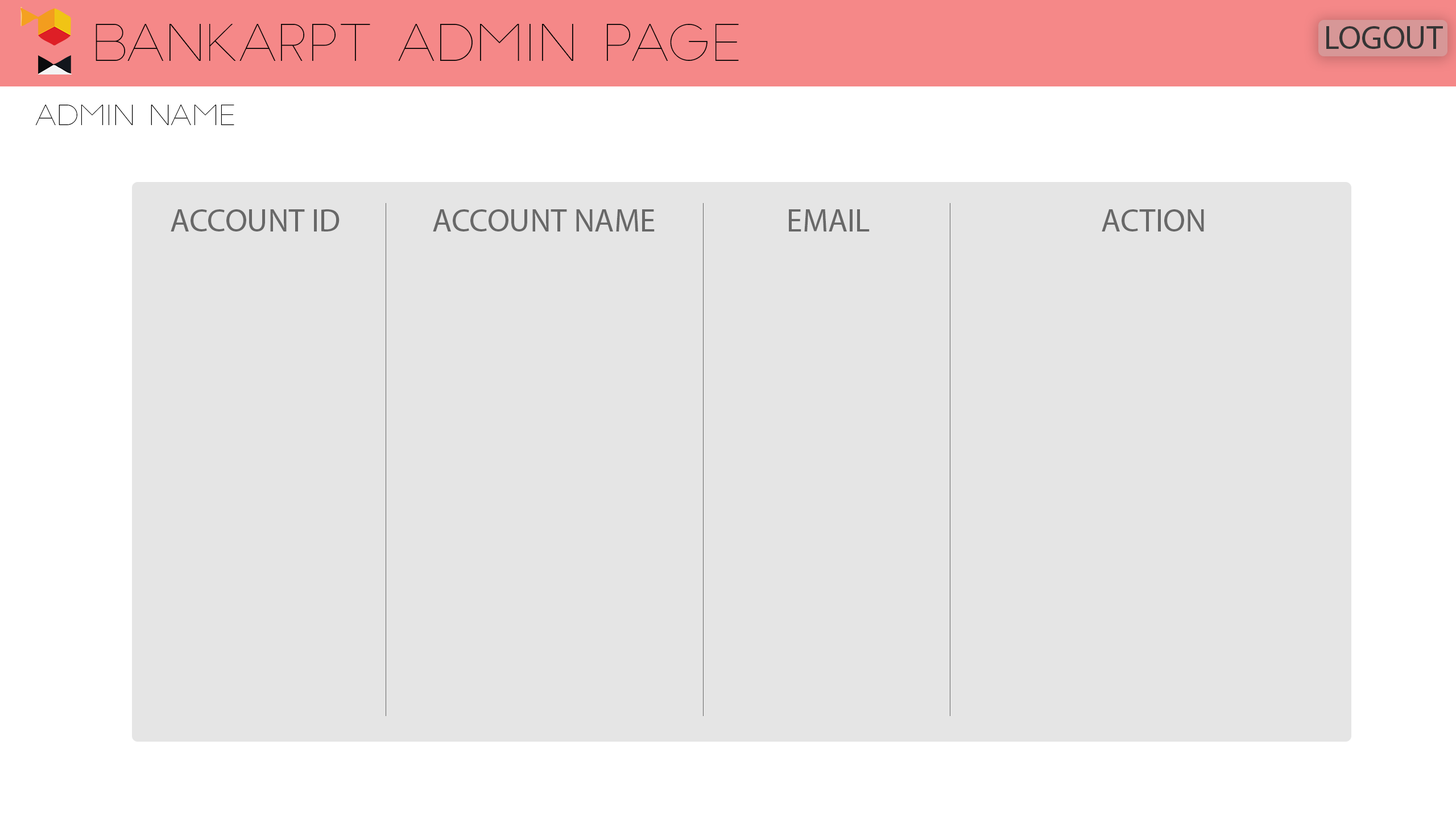
<style>
.page{position:relative;width:1456px;height:819px;background:#e5e5e5}
.page>*{position:absolute;margin:0}
.t1{font:49.3px "SlimJoe";color:#020202}
.t2{font:32.9px "MyriadPro-Regular";color:#353535}
.t3{font:27.3px "SlimJoe";color:#020202}
.t4{font:31.9px "MyriadPro-Regular";color:#686868}
</style>
<div class="page">
<p class="t1" style="left:96px;top:24px;width:643px;height:37px">BANKARPT ADMIN PAGE</p>
<p class="t2" style="left:1326px;top:26px;width:117px;height:23px">LOGOUT</p>
<p class="t3" style="left:35px;top:105px;width:199px;height:20px">ADMIN NAME</p>
<p class="t4" style="left:171px;top:209px;width:169px;height:22px">ACCOUNT ID</p>
<p class="t4" style="left:433px;top:209px;width:222px;height:22px">ACCOUNT NAME</p>
<p class="t4" style="left:789px;top:209px;width:81px;height:22px">EMAIL</p>
<p class="t4" style="left:1102px;top:209px;width:102px;height:22px">ACTION</p>
</div>
